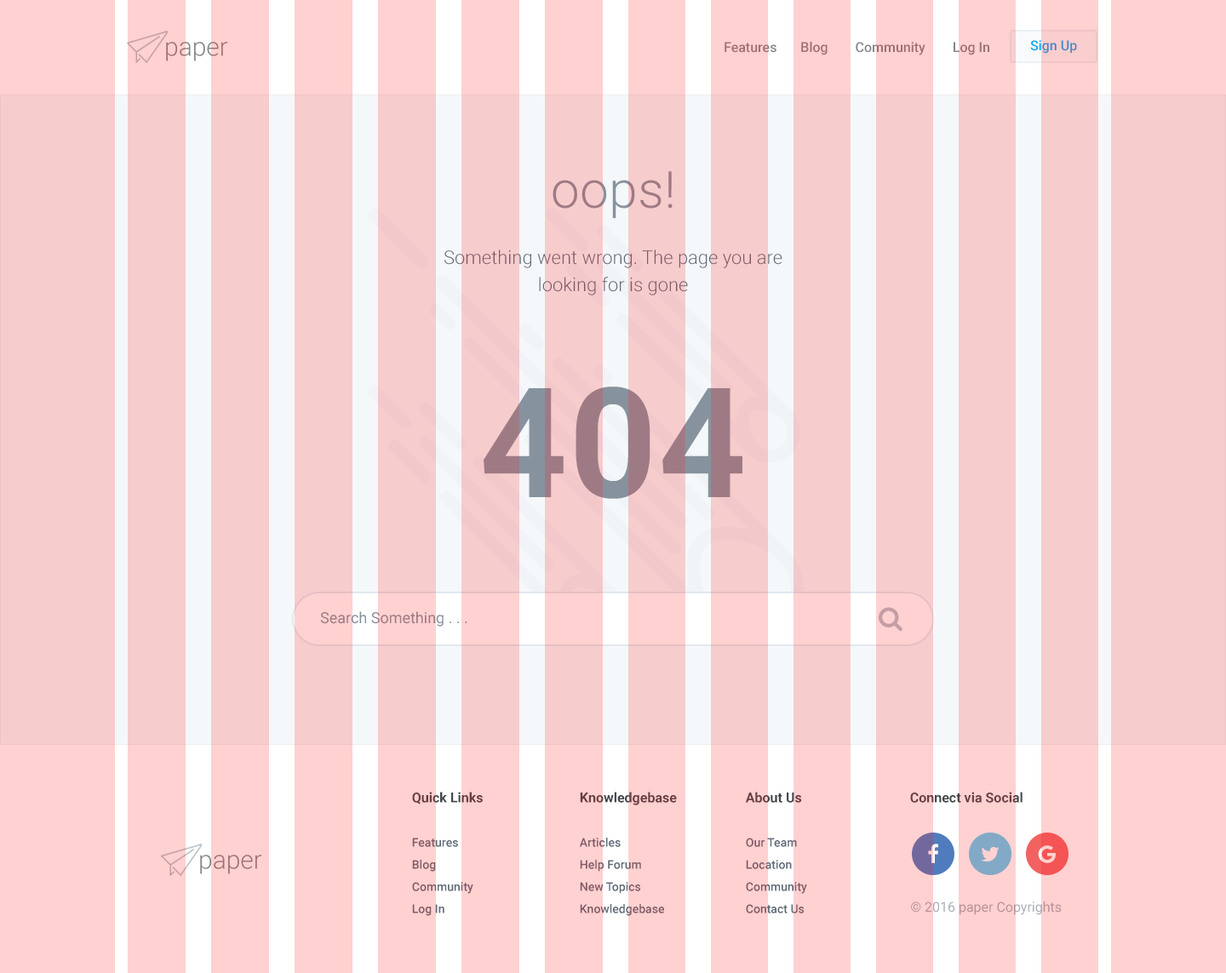
<style>
.page{position:relative;width:1226px;height:973px;background:#f7cccd}
.page>*{position:absolute;margin:0}
.t1{font:25.5px "Roboto-Light";color:#868686}
.t2{font:13.6px "Roboto-Medium";color:#868686}
.t3{font:13.6px "Roboto-Medium";color:#358cc8}
.t4{font:51.1px "Roboto-Light";letter-spacing:0.01em;color:#9e7b84}
.t5{font:18.7px/27.2px "Roboto-Light";color:#7e5964}
.t6{font:153.2px "Roboto-Bold";letter-spacing:0.01em}
.t7{font:15.3px "Roboto-Regular";color:#9e7b84}
.t8{font:11.9px/22.1px "Roboto-Medium"}
.t9{font:13.6px/22.1px "Roboto-Bold"}
.t10{font:13.6px "Roboto-Bold"}
.t11{font:13.6px "Roboto-Regular"}
</style>
<div class="page">
<p class="t1" style="left:166px;top:42px;width:62px;height:19px">paper</p>
<p class="t2" style="left:724px;top:42px;width:265px;height:13px">Features       Blog        Community        Log In</p>
<p class="t3" style="left:1030px;top:40px;width:47px;height:14px">Sign Up</p>
<p class="t4" style="left:552px;top:171px;width:120px;height:48px">oops!</p>
<p class="t5" style="left:444px;top:249px;width:338px;height:46px;text-align:center">Something went wrong. The page you are looking for is gone</p>
<p class="t6" style="left:483px;top:386px;width:259px;height:113px">404</p>
<p class="t7" style="left:320px;top:611px;width:147px;height:15px">Search Something . . .</p>
<p class="t8" style="left:412px;top:792px;width:71px;height:124px"><span class="t9">Quick Links<br><br></span>Features        <br>Blog<br>Community           <br>Log In</p>
<p class="t8" style="left:579px;top:792px;width:98px;height:124px"><span class="t9">Knowledgebase<br><br></span>Articles        <br>Help Forum<br>New Topics <br>Knowledgebase</p>
<p class="t8" style="left:745px;top:792px;width:62px;height:121px"><span class="t9">About Us<br><br></span>Our Team      <br>Location<br>Community           <br>Contact Us</p>
<p class="t10" style="left:910px;top:792px;width:112px;height:11px">Connect via Social</p>
<p class="t1" style="left:200px;top:855px;width:62px;height:19px">paper</p>
<p class="t11" style="left:911px;top:901px;width:150px;height:14px">© 2016 paper Copyrights</p>
</div>
